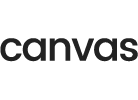
<style>
.page{position:relative;width:138px;height:100px;background:#ffffff}
.page>*{position:absolute;margin:0}
.t1{font:40px "Poppins-Medium";letter-spacing:-0.04em;color:#222222}
</style>
<div class="page">
<p class="t1" style="left:0px;top:38px;width:138px;height:24px">canvas</p>
</div>
